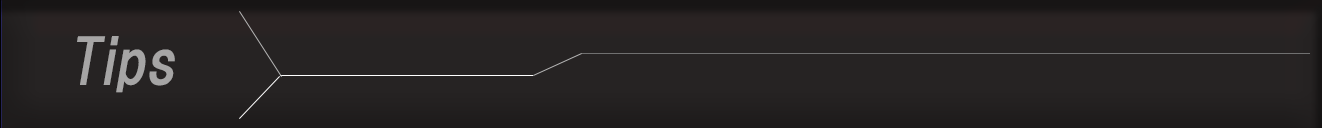
<style>
.page{position:relative;width:1322px;height:128px;background:#262323}
.page>*{position:absolute;margin:0}
.t1{font:61px "HGPGothicE";color:#a6a5a5;font-style:italic}
</style>
<div class="page">
<p class="t1" style="left:77px;top:36px;width:98px;height:57px">Tips</p>
</div>
